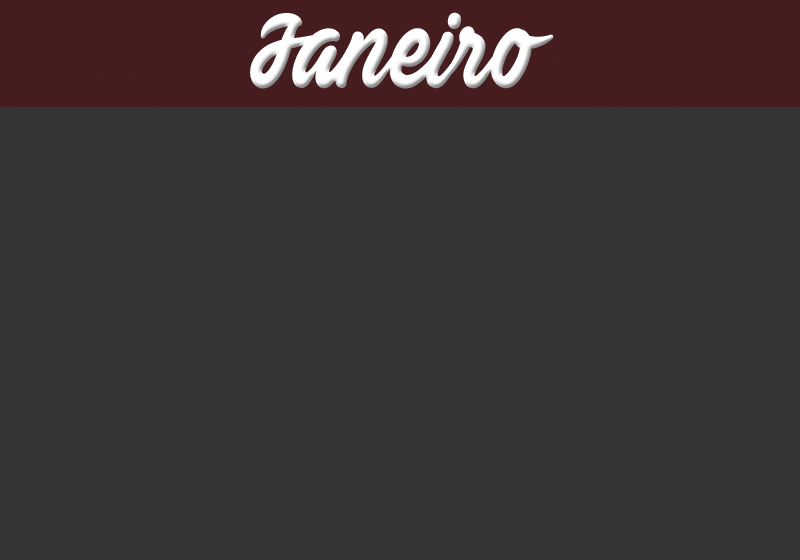
<style>
.page{position:relative;width:800px;height:560px;background:#343434}
.page>*{position:absolute;margin:0}
.t1{font:105.9px "AveFedanPERSONALUSEONLY";color:#ffffff;scale:0.81 1}
</style>
<div class="page">
<p class="t1" style="left:250px;top:12px;width:304px;height:77px">Janeiro</p>
</div>
